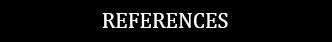
<style>
.page{position:relative;width:332px;height:42px;background:#000000}
.page>*{position:absolute;margin:0}
.t1{font:21.7px "Cambria";color:#ffffff}
</style>
<div class="page">
<p class="t1" style="left:102px;top:13px;width:126px;height:15px">REFERENCES</p>
</div>
